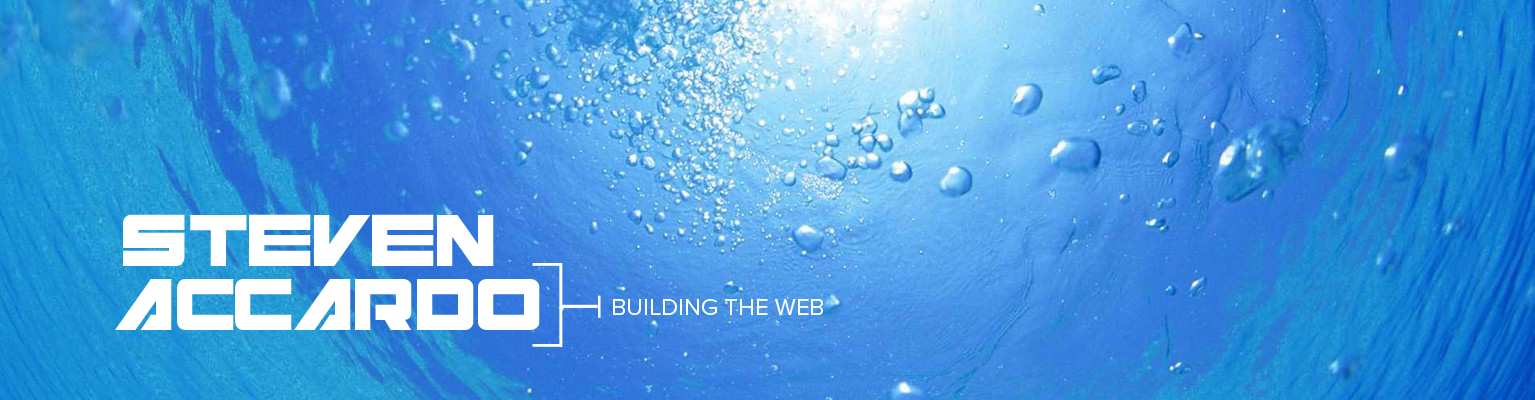
<style>
.page{position:relative;width:1535px;height:400px}
.page>*{position:absolute;margin:0}
.t1{font:64px "Cyberspace";color:#ffffff}
.t2{font:24px "ProximaNova-Regular";color:#ffffff}
</style>
<div class="page">
<p class="t1" style="left:123px;top:214px;width:371px;height:52px">STEVEN</p>
<p class="t1" style="left:115px;top:279px;width:425px;height:51px">ACCARDO</p>
<p class="t2" style="left:613px;top:299px;width:210px;height:16px">BUILDING THE WEB</p>
</div>
